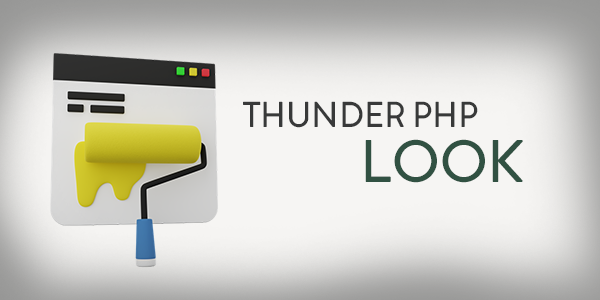
<style>
.page{position:relative;width:600px;height:300px}
.page>*{position:absolute;margin:0}
.t1{font:36px "AltonaSans-Regular";color:#383939;text-transform:uppercase}
.t2{font:60px "AltonaSans-Regular";color:#315142;text-transform:uppercase}
</style>
<div class="page">
<p class="t1" style="left:243px;top:101px;width:235px;height:27px">Thunder PHP</p>
<p class="t2" style="left:365px;top:139px;width:158px;height:44px">Look</p>
</div>
